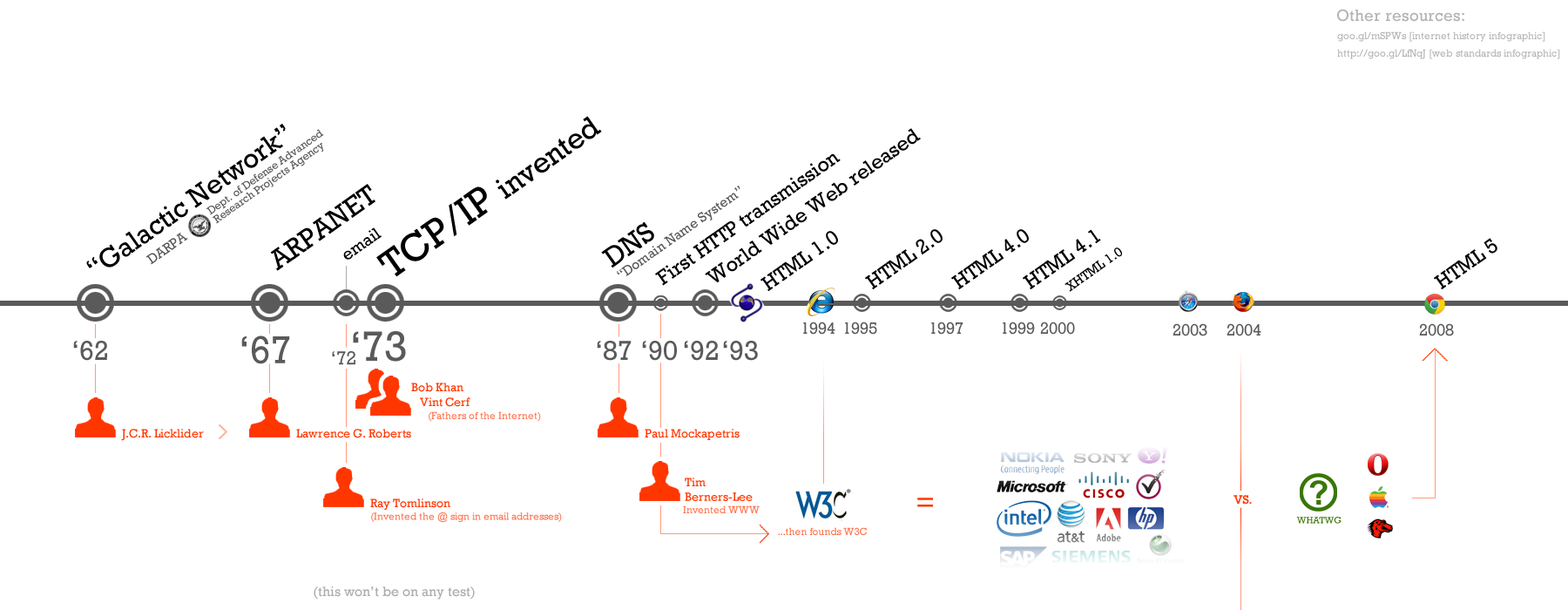
<style>
.page{position:relative;width:1568px;height:610px;background:#ffffff}
.page>*{position:absolute;margin:0}
.t1{font:16.6px "Rockwell";color:#b2b2b2}
.t2{font:10.5px "Rockwell";color:#b2b2b2}
.t3{font:27.9px "Rockwell";color:#000000}
.t4{font:30.3px "Rockwell";color:#000000}
.t5{font:40.4px "Rockwell";color:#000000}
.t6{font:11.3px/10.5px "Rockwell";color:#575757}
.t7{font:20.9px "Rockwell";color:#000000}
.t8{font:13.9px "Rockwell";color:#575757}
.t9{font:17.3px "Rockwell";color:#000000}
.t10{font:13.5px "Rockwell";color:#000000}
.t11{font:16.6px "Rockwell";color:#5a5a5a}
.t12{font:27.9px "Rockwell";color:#5a5a5a}
.t13{font:39.4px "Rockwell";color:#5a5a5a}
.t14{font:43px "Rockwell";color:#5a5a5a}
.t15{font:19.2px "Rockwell";color:#5a5a5a}
.t16{font:12.2px "Rockwell";color:#ff3600}
.t17{font:10.5px "Rockwell";color:#ff6f48}
.t18{font:29.6px "Rockwell";color:#ff3600}
.t19{font:9.5px "Rockwell";color:#3c790a}
.t20{font:13.9px "Rockwell";color:#acacac}
</style>
<div class="page">
<p class="t1" style="left:1337px;top:9px;width:127px;height:13px">Other resources:</p>
<p class="t2" style="left:1337px;top:31px;width:208px;height:11px">goo.gl/mSPWs [internet history infographic]</p>
<p class="t2" style="left:1337px;top:49px;width:223px;height:10px">http://goo.gl/LfNqJ [web standards infographic]</p>
<p class="t3" style="left:86px;top:124px;width:200px;height:144px;rotate:-35deg">“Galactic Network”</p>
<p class="t4" style="left:376px;top:116px;width:226px;height:161px;rotate:-35deg"><span class="t5">TCP/IP </span>invented</p>
<p class="t6" style="left:206px;top:129px;width:118px;height:95px;rotate:-35deg">Dept. of Defense Advanced <br>Research Projects Agency</p>
<p class="t7" style="left:705px;top:128px;width:216px;height:154px;rotate:-35deg">World Wide Web released</p>
<p class="t7" style="left:655px;top:153px;width:186px;height:133px;rotate:-35deg">First HTTP transmission</p>
<p class="t3" style="left:270px;top:184px;width:105px;height:87px;rotate:-35deg">ARPANET</p>
<p class="t3" style="left:601px;top:221px;width:53px;height:47px;rotate:-35deg">DNS</p>
<p class="t8" style="left:145px;top:233px;width:43px;height:32px;rotate:-35deg">DARPA</p>
<p class="t9" style="left:343px;top:227px;width:39px;height:33px;rotate:-35deg">email</p>
<p class="t7" style="left:760px;top:231px;width:78px;height:60px;rotate:-35deg">HTML 1.0</p>
<p class="t7" style="left:865px;top:229px;width:78px;height:60px;rotate:-35deg">HTML 2.0</p>
<p class="t7" style="left:951px;top:229px;width:78px;height:60px;rotate:-35deg">HTML 4.0</p>
<p class="t7" style="left:1023px;top:229px;width:78px;height:60px;rotate:-35deg">HTML 4.1</p>
<p class="t7" style="left:1434px;top:238px;width:63px;height:51px;rotate:-35deg">HTML 5</p>
<p class="t10" style="left:1064px;top:247px;width:58px;height:45px;rotate:-35deg">XHTML 1.0</p>
<p class="t11" style="left:803px;top:321px;width:32px;height:14px">1994</p>
<p class="t11" style="left:845px;top:321px;width:32px;height:14px">1995</p>
<p class="t11" style="left:931px;top:321px;width:32px;height:14px">1997</p>
<p class="t11" style="left:1003px;top:321px;width:32px;height:14px">1999</p>
<p class="t11" style="left:1040px;top:321px;width:35px;height:14px">2000</p>
<p class="t11" style="left:1173px;top:323px;width:34px;height:13px">2003</p>
<p class="t11" style="left:1227px;top:323px;width:34px;height:13px">2004</p>
<p class="t11" style="left:1419px;top:323px;width:35px;height:13px">2008</p>
<p class="t12" style="left:73px;top:341px;width:34px;height:20px">‘62</p>
<p class="t13" style="left:241px;top:335px;width:49px;height:29px">‘67</p>
<p class="t14" style="left:353px;top:331px;width:53px;height:31px">‘73</p>
<p class="t12" style="left:597px;top:341px;width:35px;height:20px">‘87</p>
<p class="t12" style="left:642px;top:341px;width:35px;height:20px">‘90</p>
<p class="t12" style="left:684px;top:341px;width:34px;height:20px">‘92</p>
<p class="t12" style="left:723px;top:341px;width:35px;height:20px">‘93</p>
<p class="t15" style="left:332px;top:351px;width:23px;height:14px">‘72</p>
<p class="t16" style="left:411px;top:382px;width:52px;height:10px">Bob Khan</p>
<p class="t16" style="left:420px;top:397px;width:50px;height:10px">Vint Cerf</p>
<p class="t17" style="left:429px;top:411px;width:112px;height:11px">(Fathers of the Internet)</p>
<p class="t16" style="left:121px;top:429px;width:83px;height:12px">J.C.R. Licklider</p>
<p class="t16" style="left:296px;top:429px;width:115px;height:9px">Lawrence G. Roberts</p>
<p class="t16" style="left:645px;top:429px;width:95px;height:11px">Paul Mockapetris</p>
<p class="t16" style="left:685px;top:477px;width:68px;height:24px">Tim<br>Berners-Lee</p>
<p class="t18" style="left:917px;top:497px;width:16px;height:10px">=</p>
<p class="t16" style="left:1233px;top:495px;width:19px;height:9px">VS.</p>
<p class="t17" style="left:370px;top:498px;width:192px;height:24px"><span class="t16">Ray Tomlinson<br></span>(Invented the @ sign in email addresses)</p>
<p class="t17" style="left:683px;top:505px;width:77px;height:8px">Invented WWW</p>
<p class="t19" style="left:1296px;top:517px;width:46px;height:7px">WHATWG</p>
<p class="t17" style="left:778px;top:527px;width:89px;height:8px">...then founds W3C</p>
<p class="t20" style="left:314px;top:586px;width:161px;height:13px">(this won’t be on any test)</p>
</div>
